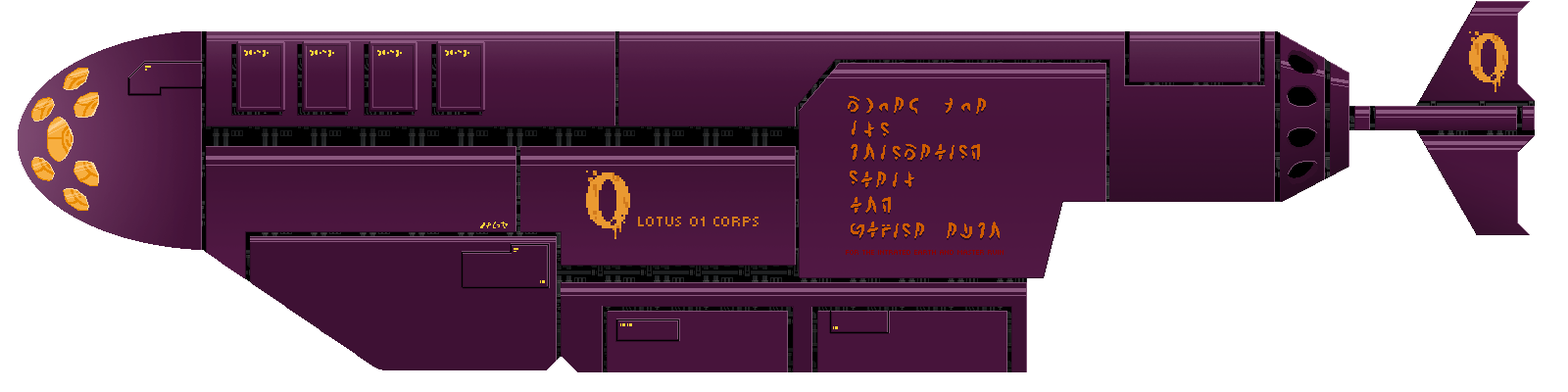
<style>
.page{position:relative;width:1568px;height:392px;background:#ffffff}
.page>*{position:absolute;margin:0}
.t1{font:20.9px "MunroSmall";color:#d1791c}
.t2{font:9.8px "MunroSmall";color:#8c0000}
</style>
<div class="page">
<p class="t1" style="left:638px;top:217px;width:121px;height:9px">LOTUS 01 Corps</p>
<p class="t2" style="left:846px;top:250px;width:158px;height:5px">FOR THE INTRATED EARTH AND MASTER RUIN</p>
</div>
